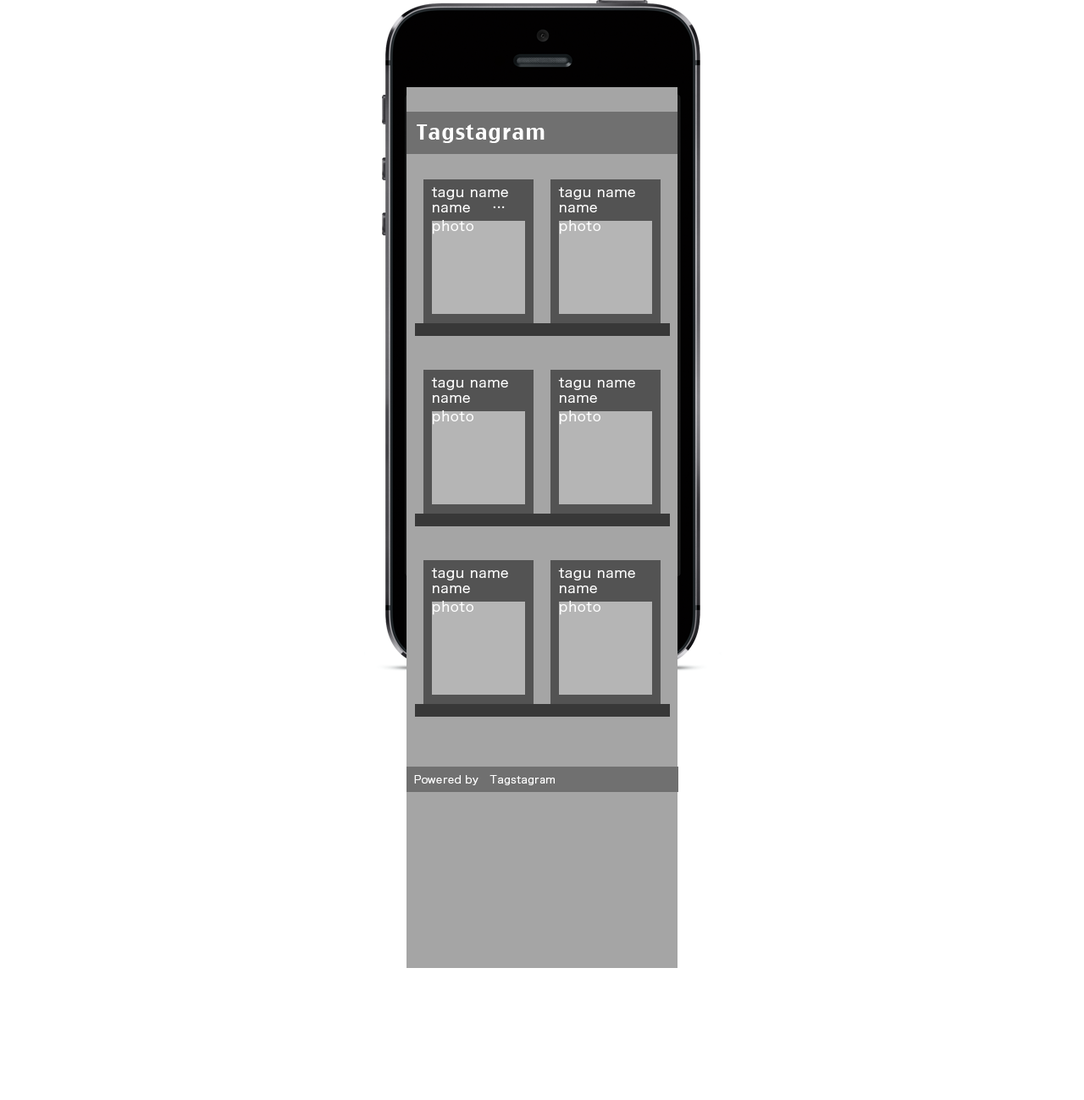
<style>
.page{position:relative;width:1084px;height:1100px;background:#ffffff}
.page>*{position:absolute;margin:0}
.t1{font:20.3px "CharcoalCY";letter-spacing:0.05em;color:#ffffff}
.t2{font:13.5px/15.2px "HiraKakuPro-W3";letter-spacing:0.05em;color:#ffffff}
.t3{font:13.5px "HiraKakuPro-W3";letter-spacing:0.05em;color:#ffffff}
.t4{font:10.2px "HiraKakuPro-W3";letter-spacing:0.05em;color:#ffffff}
</style>
<div class="page">
<p class="t1" style="left:416px;top:124px;width:128px;height:19px">Tagstagram</p>
<p class="t2" style="left:431px;top:187px;width:77px;height:25px">tagu name<br>name    …</p>
<p class="t2" style="left:558px;top:187px;width:77px;height:25px">tagu name<br>name</p>
<p class="t3" style="left:432px;top:220px;width:41px;height:14px">photo</p>
<p class="t3" style="left:559px;top:220px;width:41px;height:14px">photo</p>
<p class="t2" style="left:431px;top:378px;width:77px;height:25px">tagu name<br>name</p>
<p class="t2" style="left:558px;top:378px;width:77px;height:25px">tagu name<br>name</p>
<p class="t3" style="left:432px;top:411px;width:41px;height:14px">photo</p>
<p class="t3" style="left:559px;top:411px;width:41px;height:14px">photo</p>
<p class="t2" style="left:431px;top:568px;width:77px;height:25px">tagu name<br>name</p>
<p class="t2" style="left:558px;top:568px;width:77px;height:25px">tagu name<br>name</p>
<p class="t3" style="left:432px;top:601px;width:41px;height:14px">photo</p>
<p class="t3" style="left:559px;top:601px;width:41px;height:14px">photo</p>
<p class="t4" style="left:414px;top:775px;width:140px;height:11px">Powered by   Tagstagram</p>
</div>
